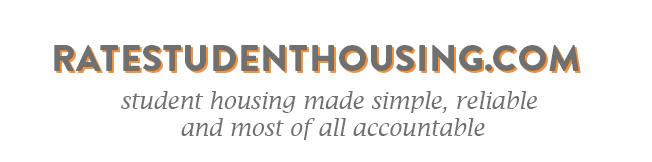
<style>
.page{position:relative;width:652px;height:162px;background:#ffffff}
.page>*{position:absolute;margin:0}
.t1{font:36.3px "BrandonGrotesque-Black";color:#6f7072;text-transform:uppercase}
.t2{font:36.3px "BrandonGrotesque-Black";text-transform:uppercase}
.t3{font:22.9px "LucidaBright-Italic";color:#6f7072}
</style>
<div class="page">
<p class="t1" style="left:54px;top:45px;width:525px;height:27px">rATESTUDENTHOUSING.COM</p>
<p class="t2" style="left:56px;top:47px;width:525px;height:27px">rATESTUDENTHOUSING.COM</p>
<p class="t3" style="left:121px;top:91px;width:416px;height:49px;text-align:center">student housing made simple, reliable <br>and most of all accountable</p>
</div>
